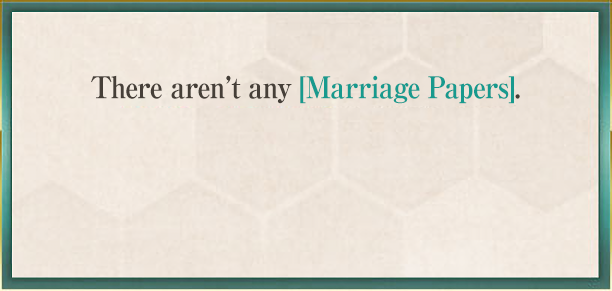
<style>
.page{position:relative;width:612px;height:291px}
.page>*{position:absolute;margin:0}
.t1{font:30px "RyuminPro-ExBold";letter-spacing:-0.04em;color:#179a8e;scale:0.9 1}
.t2{font:30px "RyuminPro-ExBold";letter-spacing:-0.04em;color:#463f38;scale:0.9 1}
.t3{font:30px "RyuminPro-ExBold";letter-spacing:-0.04em;color:#453f38;scale:0.9 1}
</style>
<div class="page">
<p class="t1" style="left:91px;top:75px;width:429px;height:29px"><span class="t2">There aren’t any </span>[Marriage Papers]<span class="t3">.</span></p>
</div>
